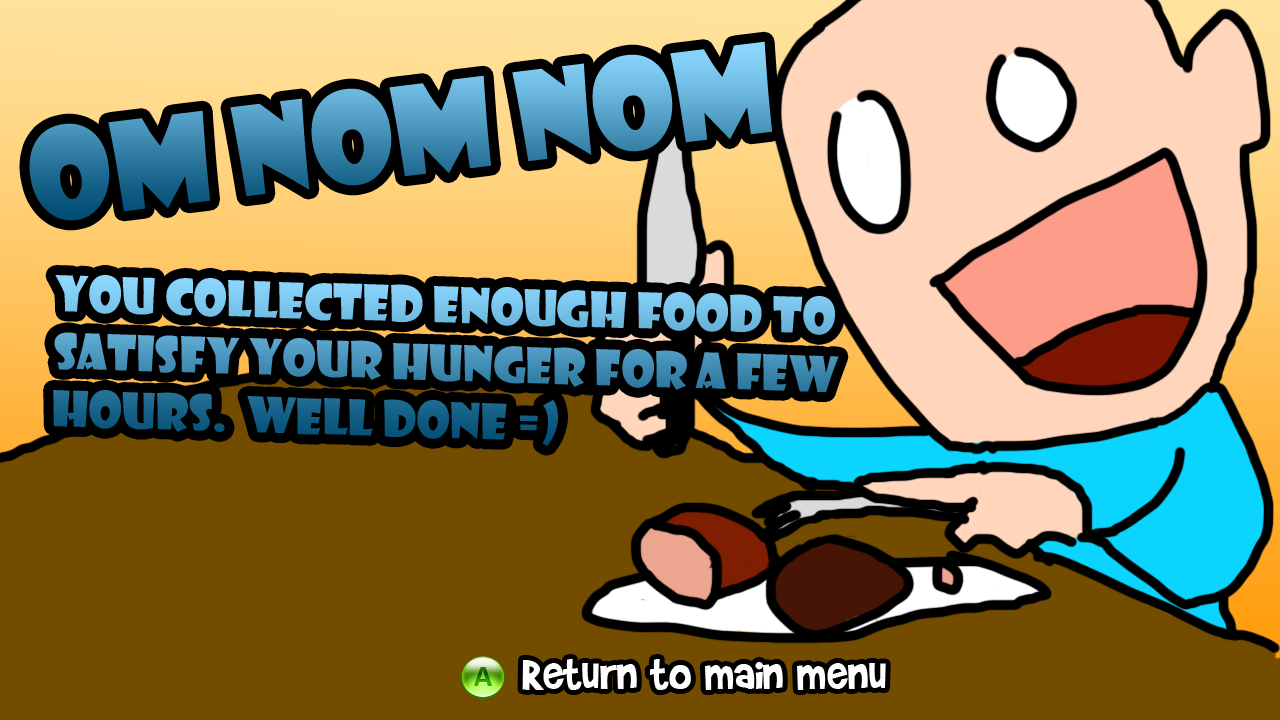
<style>
.page{position:relative;width:1280px;height:720px;background:#744c00}
.page>*{position:absolute;margin:0}
.t1{font:120px "ShowcardGothic-Reg"}
.t2{font:48px "ShowcardGothic-Reg"}
</style>
<div class="page">
<p class="t1" style="left:29px;top:41px;width:743px;height:180px;rotate:-7deg">Om nom nom</p>
<p class="t2" style="left:53px;top:275px;width:786px;height:171px;rotate:2deg">You collected enough food to satisfy your hunger for a few hours.  Well done =)</p>
</div>
